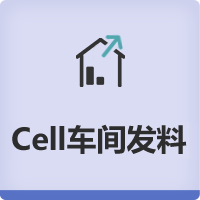
<style>
.page{position:relative;width:200px;height:200px;background:#dadcf4}
.page>*{position:absolute;margin:0}
.t1{font:30px "MicrosoftYaHei-Bold";color:#2d2d2d}
</style>
<div class="page">
<p class="t1" style="left:12px;top:124px;width:175px;height:30px">Cell车间发料</p>
</div>
